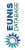
<style>
.page{position:relative;width:25px;height:50px;background:#ffffff}
.page>*{position:absolute;margin:0}
.t1{font:8px "Arial-Black";color:#0b4f8a}
.t2{font:5.5px "ArialMT"}
</style>
<div class="page">
<p class="t1" style="left:7px;top:3px;width:6px;height:28px;rotate:-90deg">EUNIS</p>
<p class="t2" style="left:14px;top:2px;width:5px;height:29px;rotate:-90deg">DATABASE</p>
</div>
